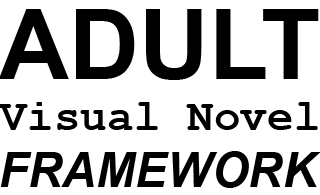
<style>
.page{position:relative;width:320px;height:195px;background:#ffffff}
.page>*{position:absolute;margin:0}
.t1{font:97px "Arial-BoldMT";color:#000000}
.t2{font:45px "CourierNewPS-BoldMT";color:#000000}
.t3{font:47.9px "Arial-BoldItalicMT";color:#000000}
</style>
<div class="page">
<p class="t1" style="left:0px;top:9px;width:319px;height:71px">ADULT</p>
<p class="t2" style="left:0px;top:102px;width:318px;height:28px">Visual Novel</p>
<p class="t3" style="left:0px;top:151px;width:321px;height:37px">FRAMEWORK</p>
</div>
